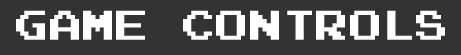
<style>
.page{position:relative;width:461px;height:55px;background:#333333}
.page>*{position:absolute;margin:0}
.t1{font:33.3px "PressStart2P";color:#ffffff}
</style>
<div class="page">
<p class="t1" style="left:16px;top:10px;width:429px;height:30px">GAME CONTROLS</p>
</div>
